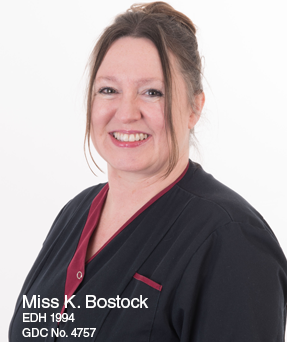
<style>
.page{position:relative;width:287px;height:342px}
.page>*{position:absolute;margin:0}
.t1{font:12px "HelveticaLTStd-Roman";letter-spacing:-0.025em;color:#fefefe}
.t2{font:18px "HelveticaLTStd-Roman";color:#fefefe}
</style>
<div class="page">
<p class="t1" style="left:22px;top:295px;width:127px;height:42px"><span class="t2">Miss K. Bostock<br></span>EDH 1994<br>GDC No. 4757</p>
</div>
